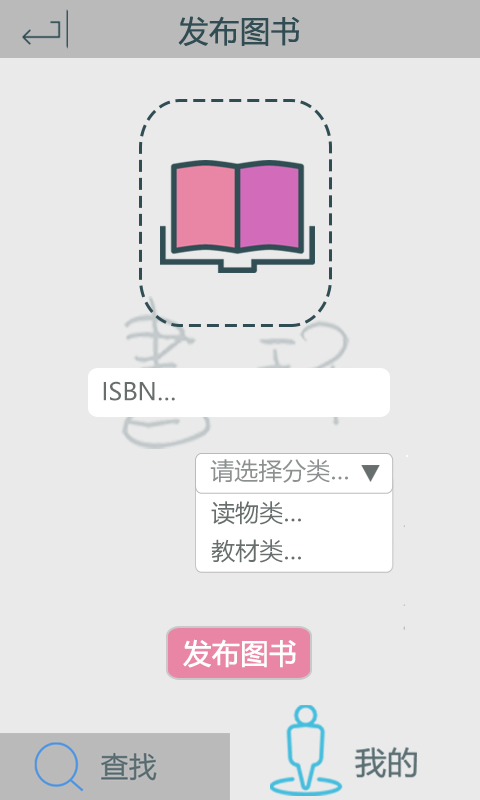
<style>
.page{position:relative;width:480px;height:800px;background:#eaeaea}
.page>*{position:absolute;margin:0}
.t1{font:30px "MicrosoftYaHei";color:#304d54;font-weight:bold}
.t2{font:24px "MicrosoftYaHei";color:#686e6e}
.t3{font:24px "MicrosoftYaHei";color:#8c9090}
.t4{font:28.1px "MicrosoftYaHei";color:#ffffff;font-weight:bold}
</style>
<div class="page">
<p class="t1" style="left:178px;top:16px;width:122px;height:31px">发布图书</p>
<p class="t2" style="left:103px;top:381px;width:72px;height:20px">ISBN…</p>
<p class="t3" style="left:210px;top:459px;width:138px;height:24px">请选择分类…</p>
<p class="t2" style="left:211px;top:501px;width:90px;height:24px">读物类…</p>
<p class="t2" style="left:211px;top:539px;width:90px;height:24px">教材类…</p>
<p class="t4" style="left:183px;top:639px;width:113px;height:29px">发布图书</p>
</div>
